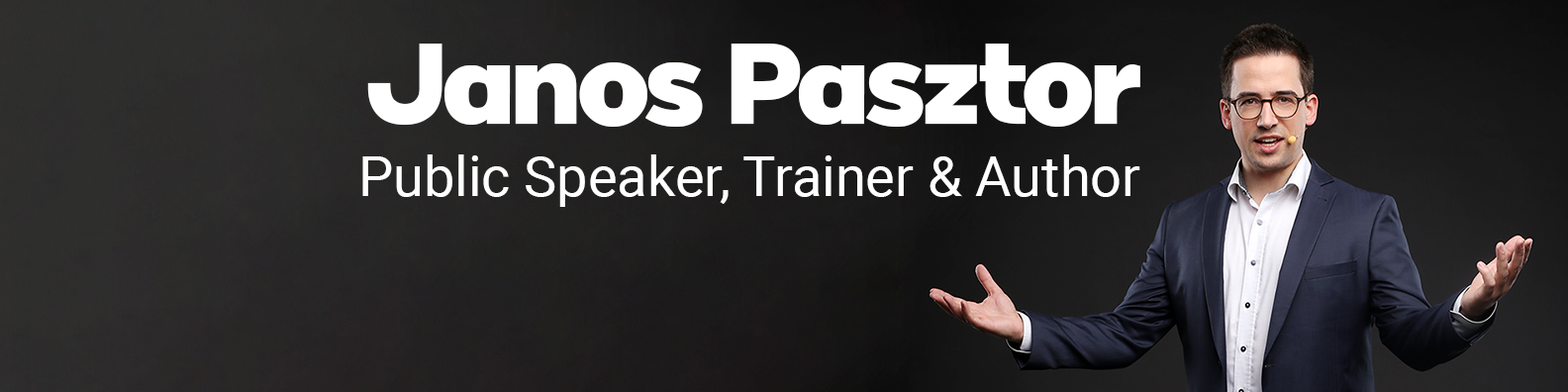
<style>
.page{position:relative;width:1568px;height:392px}
.page>*{position:absolute;margin:0}
.t1{font:116.5px "Provicali";color:#ffffff}
.t2{font:55.3px "Roboto-Regular";color:#ffffff}
</style>
<div class="page">
<p class="t1" style="left:367px;top:44px;width:773px;height:83px">Janos Pasztor</p>
<p class="t2" style="left:362px;top:154px;width:778px;height:53px">Public Speaker, Trainer &amp; Author</p>
</div>
